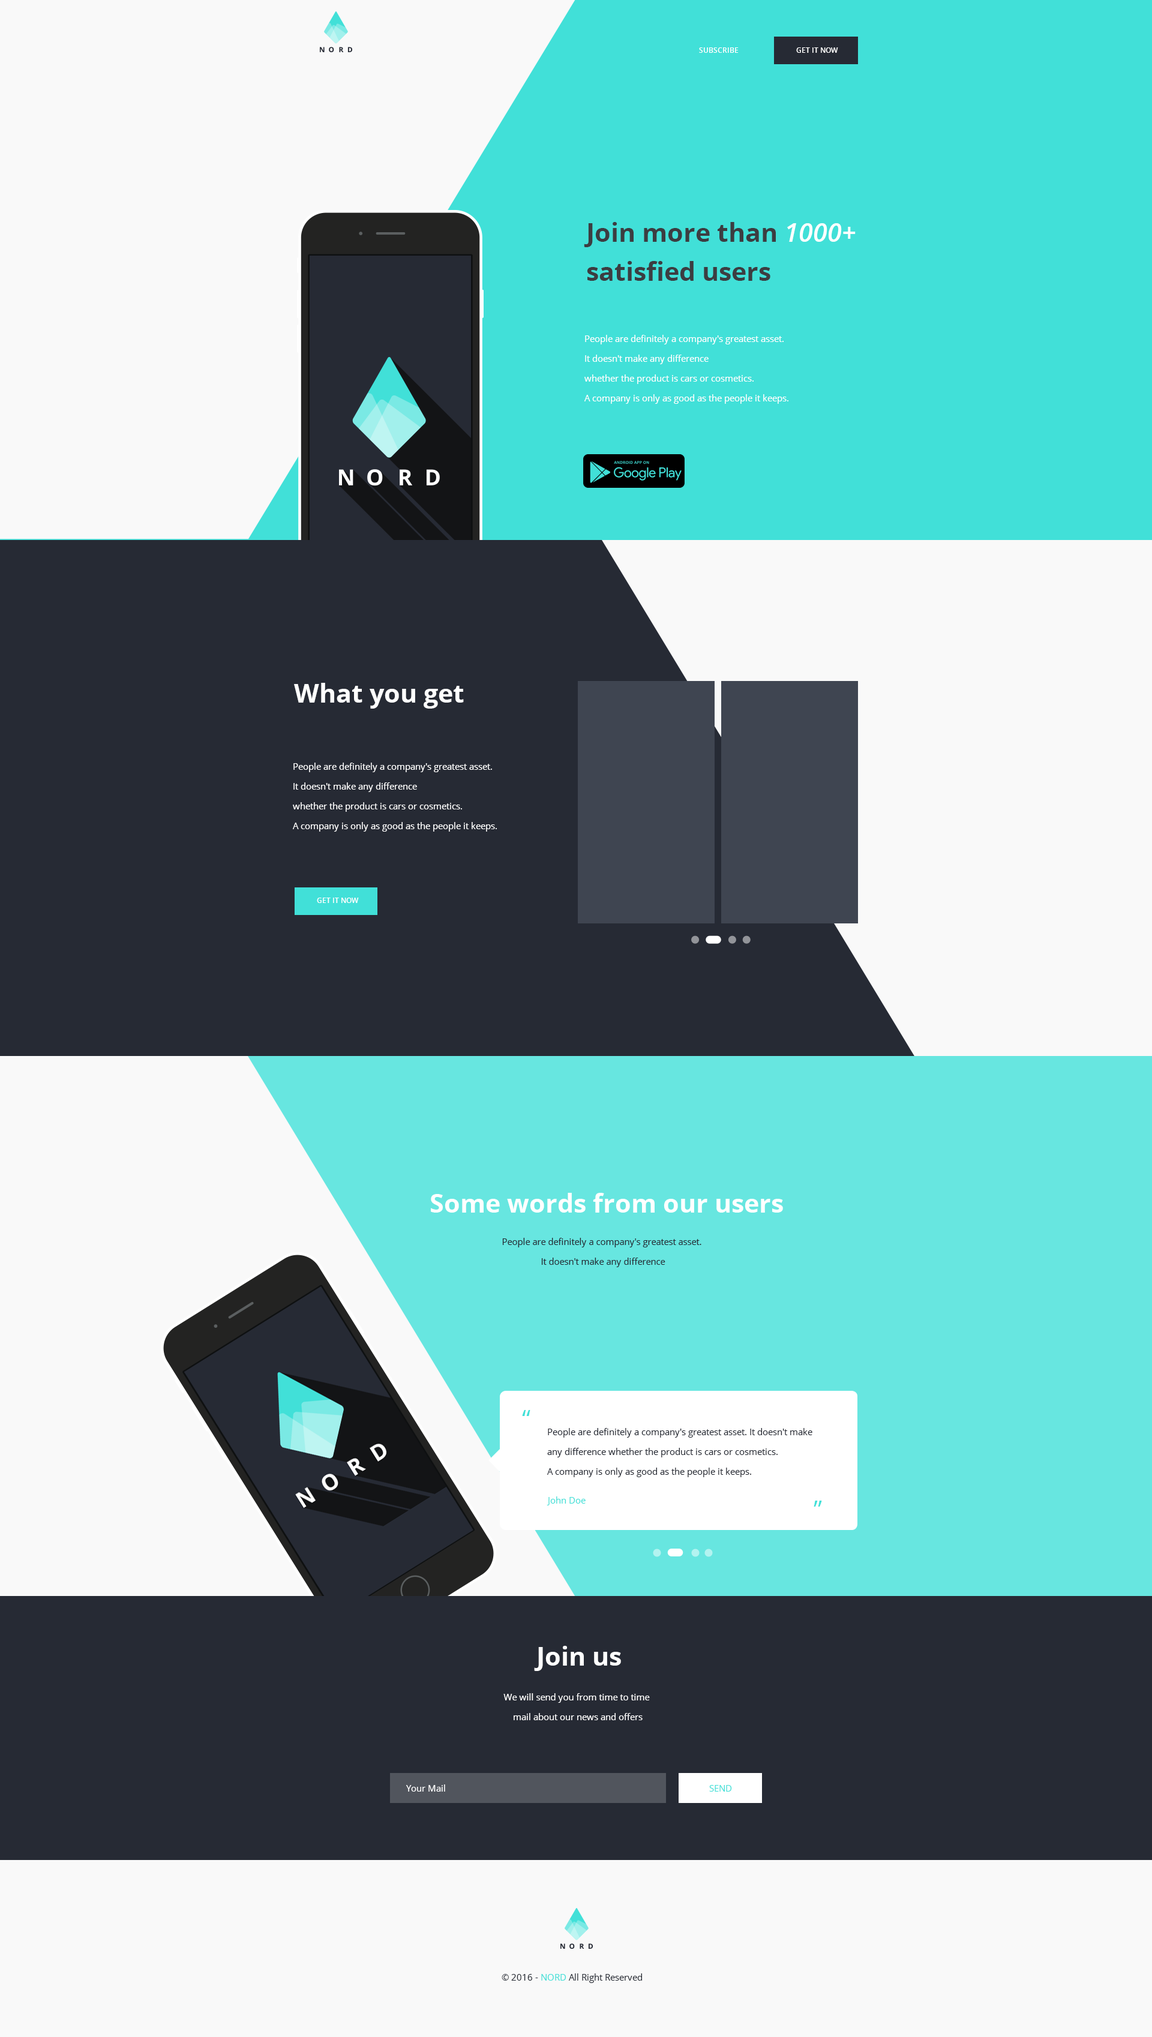
<style>
.page{position:relative;width:1152px;height:2037px;background:#f9f9f9}
.page>*{position:absolute;margin:0}
.t1{font:7.2px "OpenSans-Semibold";color:#ffffff}
.t2{font:25.8px/39px "OpenSans-Bold";color:#3c3d41}
.t3{font:25.8px/39px "OpenSans-SemiboldItalic";color:#ffffff}
.t4{font:9px/19.8px "OpenSans";color:#ffffff}
.t5{font:25.8px "OpenSans-Bold";color:#ffffff}
.t6{font:9px/19.8px "OpenSans";color:#262a34}
.t7{font:24px "OpenSans";color:#41e0d8}
.t8{font:9px "OpenSans";color:#41e0d8}
.t9{font:9px "OpenSans";color:#ffffff}
.t10{font:9px "OpenSans";color:#262a34}
</style>
<div class="page">
<p class="t1" style="left:699px;top:47px;width:40px;height:6px">SUBSCRIBE</p>
<p class="t1" style="left:796px;top:47px;width:42px;height:6px">GET IT NOW</p>
<p class="t2" style="left:584px;top:222px;width:272px;height:59px">Join more than <span class="t3">1000+<br></span>satisfied users</p>
<p class="t4" style="left:584px;top:335px;width:204px;height:69px">People are definitely a company's greatest asset. <br>It doesn't make any difference <br>whether the product is cars or cosmetics. <br>A company is only as good as the people it keeps.</p>
<p class="t5" style="left:294px;top:683px;width:170px;height:26px">What you get</p>
<p class="t4" style="left:293px;top:763px;width:204px;height:69px">People are definitely a company's greatest asset. <br>It doesn't make any difference <br>whether the product is cars or cosmetics. <br>A company is only as good as the people it keeps.</p>
<p class="t1" style="left:317px;top:898px;width:42px;height:5px">GET IT NOW</p>
<p class="t5" style="left:431px;top:1193px;width:352px;height:20px">Some words from our users</p>
<p class="t6" style="left:502px;top:1238px;width:199px;height:29px;text-align:center">People are definitely a company's greatest asset. <br>It doesn't make any difference</p>
<p class="t7" style="left:522px;top:1410px;width:8px;height:6px">“</p>
<p class="t6" style="left:547px;top:1428px;width:265px;height:49px">People are definitely a company's greatest asset. It doesn't make <br>any difference whether the product is cars or cosmetics. <br>A company is only as good as the people it keeps.</p>
<p class="t8" style="left:547px;top:1496px;width:39px;height:9px">John Doe</p>
<p class="t7" style="left:814px;top:1501px;width:8px;height:6px">”</p>
<p class="t5" style="left:534px;top:1646px;width:87px;height:25px">Join us</p>
<p class="t4" style="left:503px;top:1693px;width:147px;height:27px;text-align:center">We will send you from time to time <br>mail about our news and offers</p>
<p class="t9" style="left:406px;top:1784px;width:39px;height:8px">Your Mail</p>
<p class="t8" style="left:709px;top:1785px;width:23px;height:7px">SEND</p>
<p class="t10" style="left:502px;top:1973px;width:140px;height:10px">© 2016 - <span class="t8">NORD</span> All Right Reserved</p>
</div>
